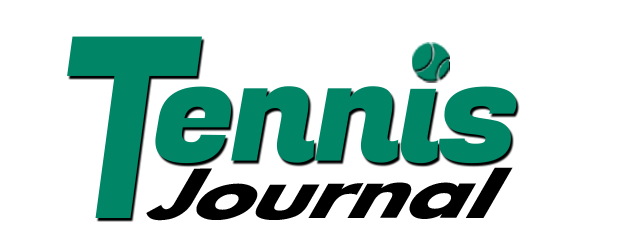
<style>
.page{position:relative;width:621px;height:238px;background:#ffffff}
.page>*{position:absolute;margin:0}
.t1{font:252.1px "FugazOne-Regular";color:#008566;scale:0.76 1}
.t2{font:77px "Futura-Bold";letter-spacing:-0.02em;color:#000000;scale:1.18 1}
</style>
<div class="page">
<p class="t1" style="left:67px;top:36px;width:135px;height:182px">T</p>
<p class="t2" style="left:146px;top:167px;width:367px;height:54px">JournaI</p>
</div>
